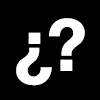
<style>
.page{position:relative;width:100px;height:100px;background:#000000}
.page>*{position:absolute;margin:0}
.t1{font:72px "HelveticaNeue-Bold";letter-spacing:-0.1em;color:#ffffff}
</style>
<div class="page">
<p class="t1" style="left:16px;top:18px;width:69px;height:68px">¿?</p>
</div>
